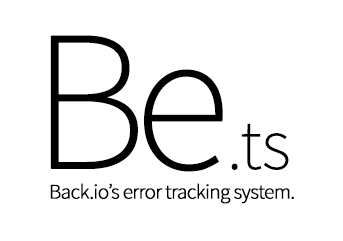
<style>
.page{position:relative;width:343px;height:241px;background:#ffffff}
.page>*{position:absolute;margin:0}
.t1{font:200px "SourceSansPro-ExtraLight";letter-spacing:-0.085em;color:#000000;font-weight:bold}
.t2{font:72px "SourceSansPro-ExtraLight";letter-spacing:-0.025em;color:#000000;font-weight:bold}
.t3{font:21px "SourceSansPro-Light";letter-spacing:-0.05em;color:#000000;font-weight:bold}
</style>
<div class="page">
<p class="t1" style="left:50px;top:35px;width:173px;height:137px">Be</p>
<p class="t2" style="left:231px;top:123px;width:58px;height:47px">.ts</p>
<p class="t3" style="left:50px;top:183px;width:244px;height:21px">Back.io’s error tracking system.</p>
</div>
